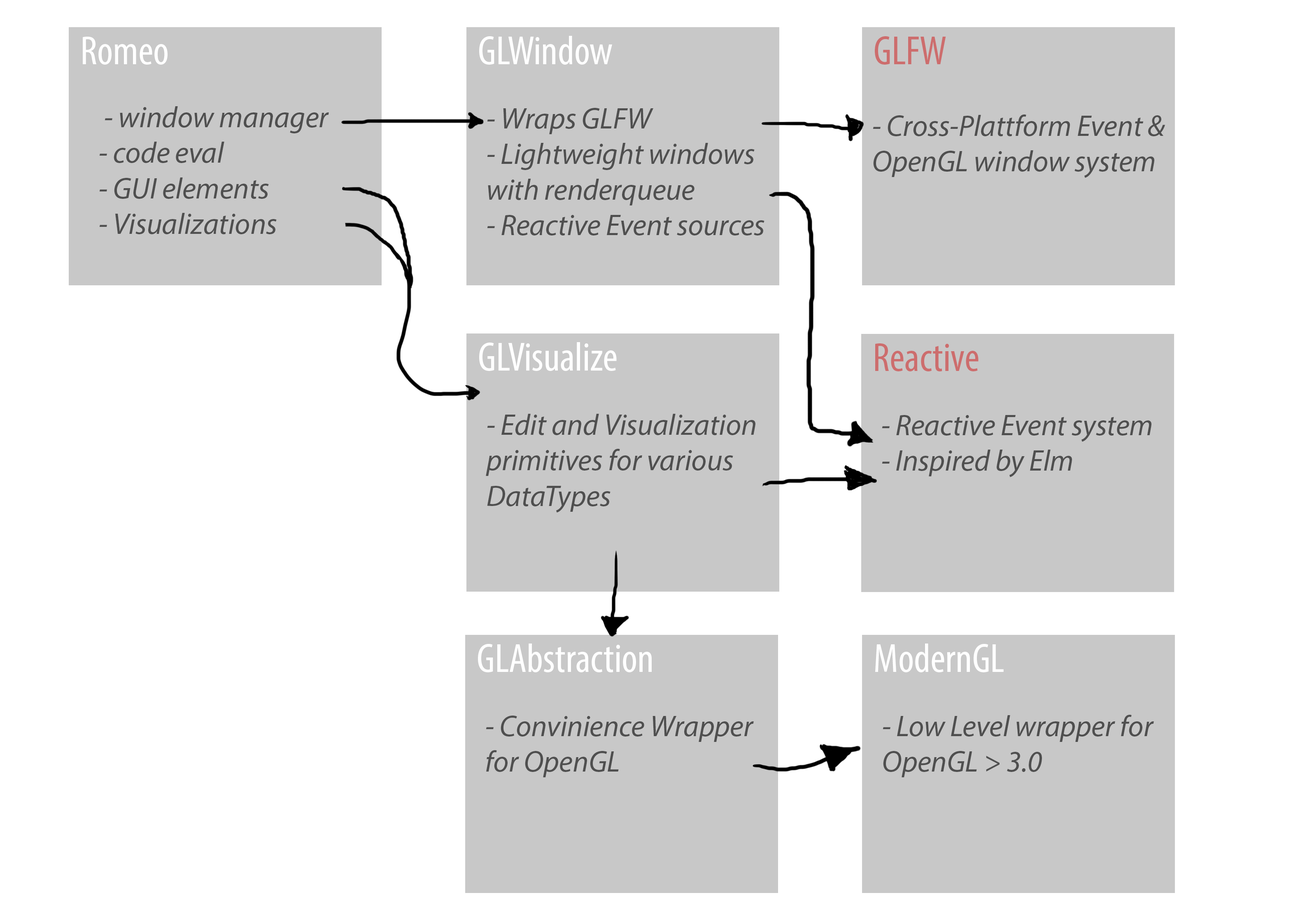
<style>
.page{position:relative;width:1305px;height:914px;background:#ffffff}
.page>*{position:absolute;margin:0}
.t1{font:41.2px "MyriadPro-Cond";color:#ffffff}
.t2{font:41.2px "MyriadPro-Cond";color:#cd6d6d}
.t3{font:29.6px "MyriadPro-It";color:#4f4f4f}
</style>
<div class="page">
<p class="t1" style="left:83px;top:37px;width:85px;height:28px">Romeo</p>
<p class="t1" style="left:479px;top:36px;width:133px;height:29px">GLWindow</p>
<p class="t2" style="left:875px;top:36px;width:71px;height:29px">GLFW</p>
<p class="t3" style="left:99px;top:106px;width:230px;height:128px">- window manager<br>- code eval <br>- GUI elements<br>- Visualizations</p>
<p class="t3" style="left:487px;top:108px;width:277px;height:127px">- Wraps GLFW<br>- Lightweight windows<br>with renderqueue<br>- Reactive Event sources</p>
<p class="t3" style="left:873px;top:114px;width:292px;height:64px">- Cross-Plattform Event &amp;<br>OpenGL window system</p>
<p class="t1" style="left:479px;top:342px;width:138px;height:29px">GLVisualize</p>
<p class="t2" style="left:875px;top:343px;width:103px;height:28px">Reactive</p>
<p class="t3" style="left:486px;top:414px;width:269px;height:98px">- Edit and Visualization<br>primitives for various <br>DataTypes</p>
<p class="t3" style="left:882px;top:415px;width:269px;height:62px">- Reactive Event system<br>- Inspired by Elm</p>
<p class="t1" style="left:478px;top:643px;width:174px;height:29px">GLAbstraction</p>
<p class="t1" style="left:875px;top:643px;width:129px;height:29px">ModernGL</p>
<p class="t3" style="left:486px;top:715px;width:268px;height:62px">- Convinience Wrapper <br>for OpenGL</p>
<p class="t3" style="left:883px;top:715px;width:271px;height:62px">- Low Level wrapper for<br>OpenGL &gt; 3.0</p>
</div>
